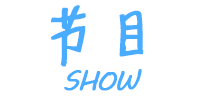
<style>
.page{position:relative;width:200px;height:100px;background:#ffffff}
.page>*{position:absolute;margin:0}
.t1{font:58.7px "SentyMARUKO";letter-spacing:-0.02em;color:#4aacff;text-transform:uppercase;font-weight:bold}
.t2{font:26.7px "MVBoli";letter-spacing:-0.02em;color:#4aacff;text-transform:uppercase;font-weight:bold}
</style>
<div class="page">
<p class="t1" style="left:51px;top:5px;width:93px;height:62px">节目</p>
<p class="t2" style="left:64px;top:69px;width:78px;height:22px">Show</p>
</div>
